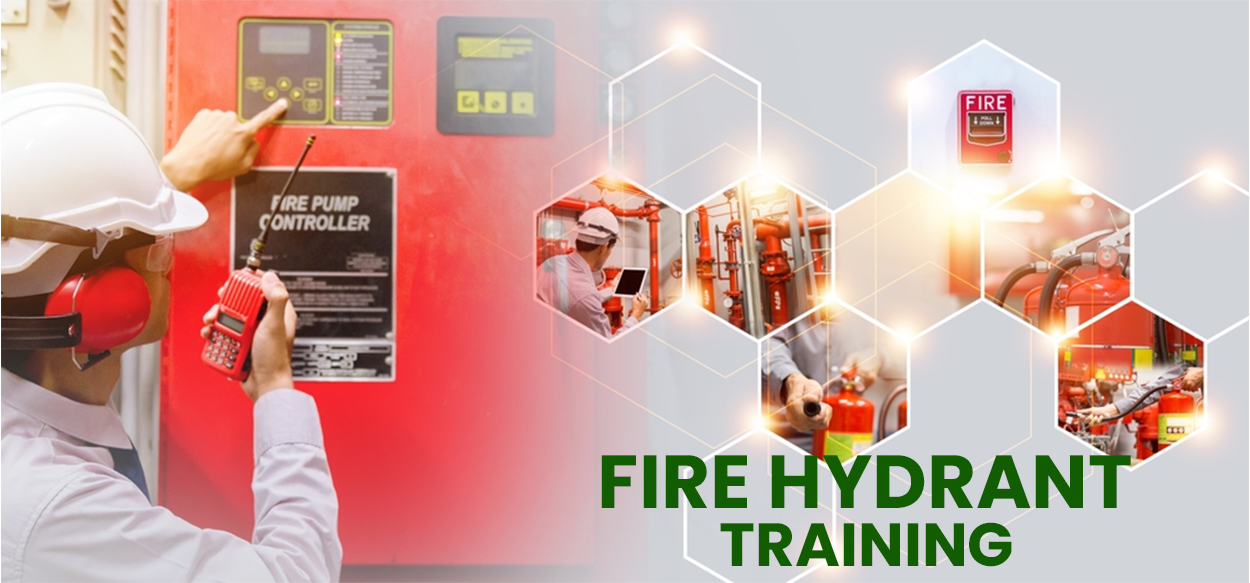
<style>
.page{position:relative;width:1250px;height:583px}
.page>*{position:absolute;margin:0}
.t1{font:75.3px "Poppins-Bold";color:#125d01;text-transform:uppercase}
.t2{font:61px "Poppins-Bold";color:#125d01;text-transform:uppercase}
</style>
<div class="page">
<p class="t1" style="left:601px;top:455px;width:530px;height:53px">Fire HYdrant</p>
<p class="t2" style="left:720px;top:522px;width:292px;height:45px">Training</p>
</div>
